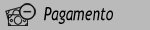
<style>
.page{position:relative;width:150px;height:30px;background:#bababa}
.page>*{position:absolute;margin:0}
.t1{font:18.2px "TrebuchetMS-Italic";color:#000000;scale:0.77 1}
</style>
<div class="page">
<p class="t1" style="left:44px;top:7px;width:69px;height:17px">Pagamento</p>
</div>
